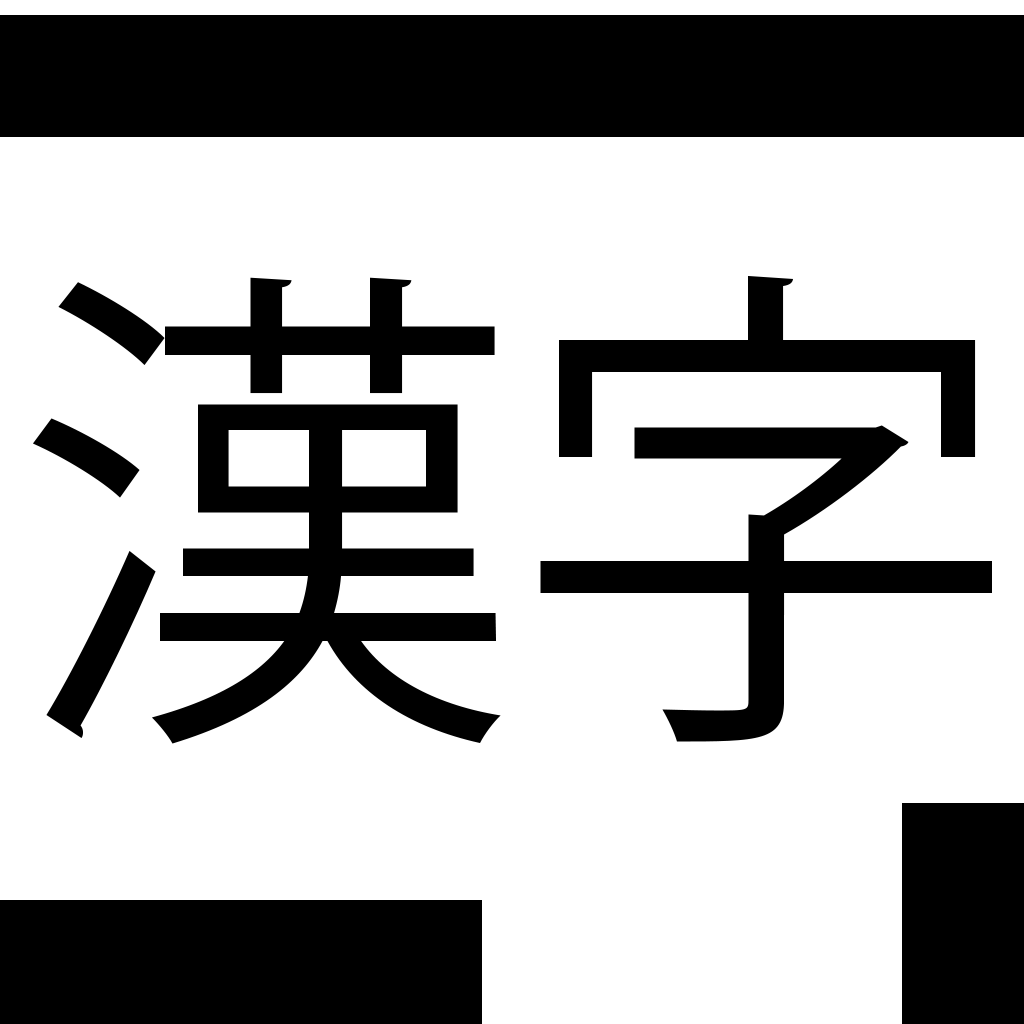
<style>
.page{position:relative;width:1024px;height:1024px;background:#ffffff}
.page>*{position:absolute;margin:0}
.t1{font:500px "KozGoPr6N-Regular";color:#000000}
</style>
<div class="page">
<p class="t1" style="left:33px;top:276px;width:959px;height:468px">漢字</p>
</div>
